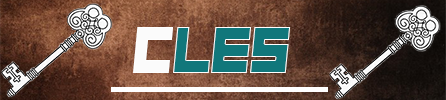
<style>
.page{position:relative;width:446px;height:100px}
.page>*{position:absolute;margin:0}
.t1{font:66.7px "Hindsight2020";color:#fbfbfb;scale:0.92 1}
.t2{font:66.7px "Hindsight2020";color:#11777b;scale:0.92 1}
</style>
<div class="page">
<p class="t1" style="left:133px;top:27px;width:40px;height:46px">c</p>
<p class="t2" style="left:173px;top:27px;width:118px;height:46px">les</p>
</div>
